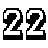
<style>
.page{position:relative;width:48px;height:48px;background:#ffffff}
.page>*{position:absolute;margin:0}
.t1{font:36px "KarmaFuture-Regular";color:#010101}
</style>
<div class="page">
<p class="t1" style="left:3px;top:8px;width:43px;height:32px">22</p>
</div>
